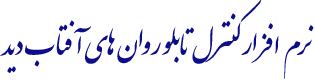
<style>
.page{position:relative;width:315px;height:80px;background:#ffffff}
.page>*{position:absolute;margin:0}
.t1{font:48px "IranNastaliq";color:#0d0d8b}
</style>
<div class="page">
<p class="t1" style="left:0px;top:0px;width:314px;height:79px">نرم افزار کنترل تابلو روان های آفتاب دید</p>
</div>
